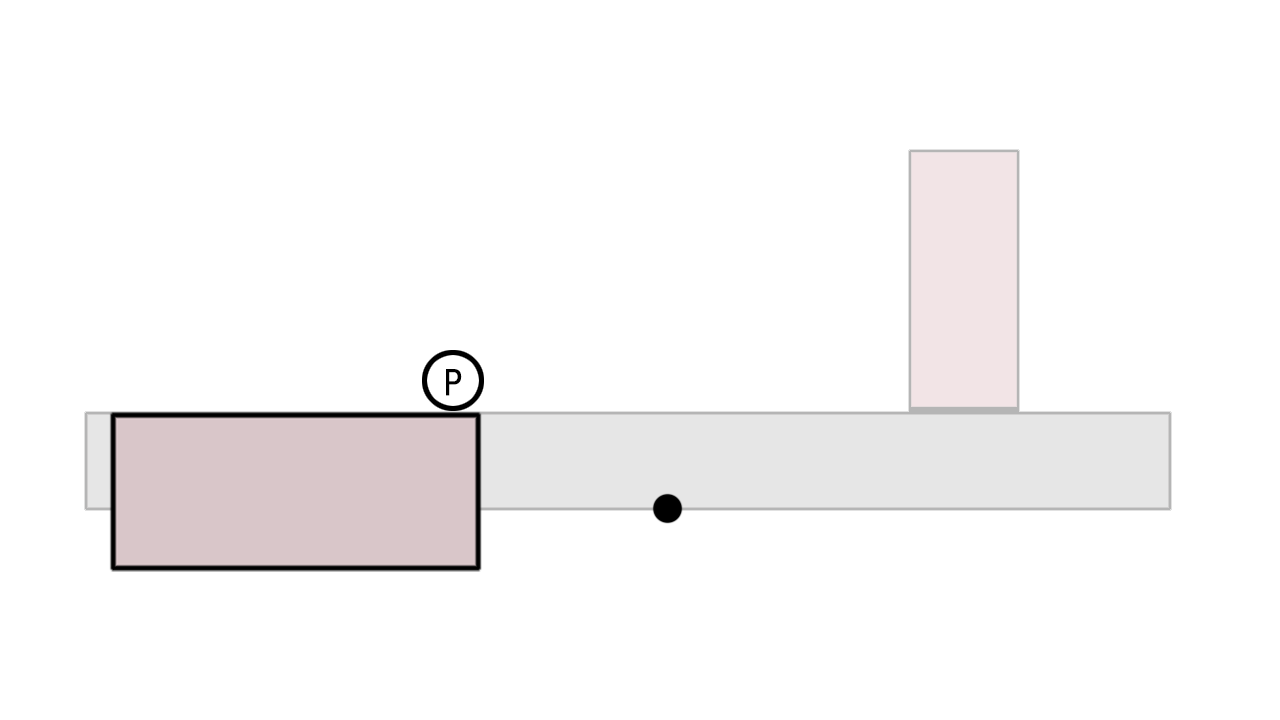
<style>
.page{position:relative;width:1280px;height:720px;background:#ffffff}
.page>*{position:absolute;margin:0}
.t1{font:33.3px "HGPGothicE";letter-spacing:0.1em;color:#000000}
</style>
<div class="page">
<p class="t1" style="left:446px;top:369px;width:16px;height:27px">P</p>
</div>
